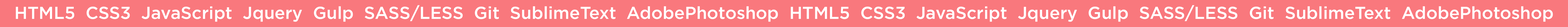
<style>
.page{position:relative;width:1568px;height:27px;background:#f9787d}
.page>*{position:absolute;margin:0}
.t1{font:17.3px "GothamPro-Medium";color:#ffffff}
</style>
<div class="page">
<p class="t1" style="left:16px;top:5px;width:1537px;height:17px">HTML5  CSS3  JavaScript  Jquery  Gulp  SASS/LESS  Git  SublimeText  AdobePhotoshop  HTML5  CSS3  JavaScript  Jquery  Gulp  SASS/LESS  Git  SublimeText  AdobePhotoshop</p>
</div>
